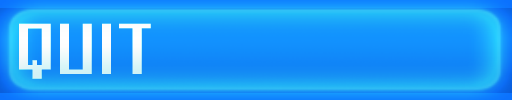
<style>
.page{position:relative;width:512px;height:100px}
.page>*{position:absolute;margin:0}
.t1{font:66.6px "Starcadia";color:#fffefe}
</style>
<div class="page">
<p class="t1" style="left:19px;top:23px;width:132px;height:56px">QUIT</p>
</div>
